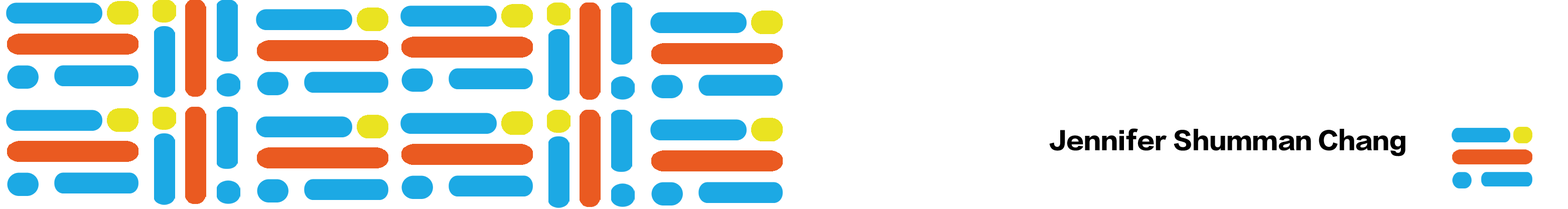
<style>
.page{position:relative;width:1568px;height:209px;background:#ffffff}
.page>*{position:absolute;margin:0}
.t1{font:23.4px "FZLTTHB--B51-0";color:#000000}
</style>
<div class="page">
<p class="t1" style="left:1049px;top:128px;width:356px;height:29px">Jennifer Shumman Chang</p>
</div>
